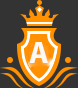
<style>
.page{position:relative;width:78px;height:88px;background:#333333}
.page>*{position:absolute;margin:0}
.t1{font:30px "MyriadHebrew-Bold";color:#faf9f7}
</style>
<div class="page">
<p class="t1" style="left:29px;top:42px;width:19px;height:21px">A</p>
</div>
